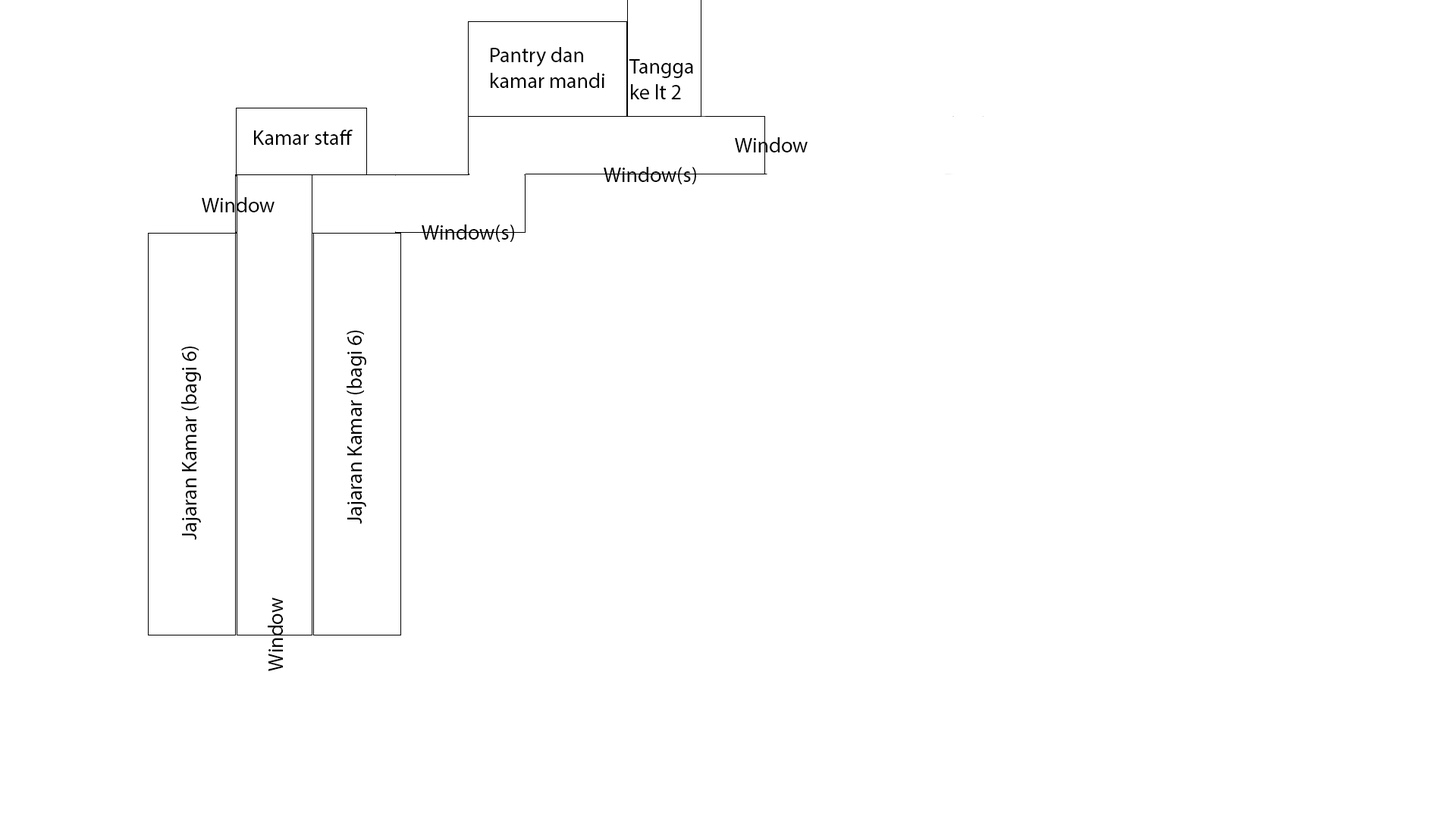
<style>
.page{position:relative;width:1456px;height:819px;background:#ffffff}
.page>*{position:absolute;margin:0}
.t1{font:21.2px "MyriadPro-Regular";color:#000000}
</style>
<div class="page">
<p class="t1" style="left:491px;top:47px;width:113px;height:41px">Pantry dan <br>kamar mandi</p>
<p class="t1" style="left:629px;top:59px;width:64px;height:40px">Tangga<br>ke lt 2</p>
<p class="t1" style="left:254px;top:130px;width:99px;height:15px">Kamar staff</p>
<p class="t1" style="left:735px;top:137px;width:73px;height:15px">Window</p>
<p class="t1" style="left:604px;top:167px;width:92px;height:17px">Window(s)</p>
<p class="t1" style="left:202px;top:197px;width:73px;height:15px">Window</p>
<p class="t1" style="left:422px;top:224px;width:92px;height:18px">Window(s)</p>
<p class="t1" style="left:347px;top:331px;width:19px;height:193px;rotate:-90deg">Jajaran Kamar (bagi 6)</p>
<p class="t1" style="left:181px;top:347px;width:20px;height:193px;rotate:-90deg">Jajaran Kamar (bagi 6)</p>
<p class="t1" style="left:268px;top:598px;width:15px;height:73px;rotate:-90deg">Window</p>
</div>
